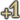
<style>
.page{position:relative;width:20px;height:20px;background:#ffffff}
.page>*{position:absolute;margin:0}
.t1{font:22px "Octavian";color:#d9c586}
</style>
<div class="page">
<p class="t1" style="left:10px;top:1px;width:9px;height:16px">1</p>
</div>
